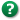
<style>
.page{position:relative;width:20px;height:20px;background:#ffffff}
.page>*{position:absolute;margin:0}
.t1{font:14px "Verdana-Bold";letter-spacing:0.01em;color:#ffffff}
</style>
<div class="page">
<p class="t1" style="left:7px;top:3px;width:7px;height:11px">?</p>
</div>
